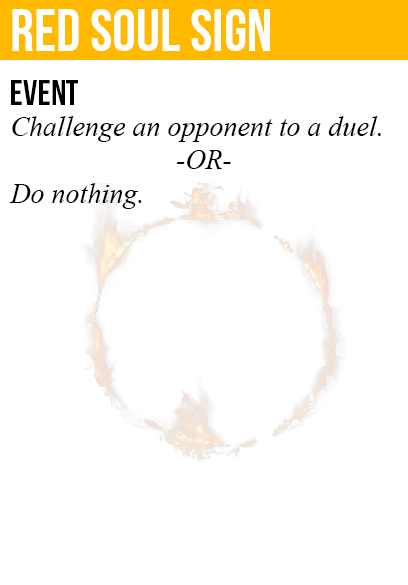
<style>
.page{position:relative;width:408px;height:585px;background:#ffffff}
.page>*{position:absolute;margin:0}
.t1{font:60px "BebasNeue";color:#ffffff}
.t2{font:36px "BebasNeue";color:#000000}
.t3{font:28px "TimesNewRomanPS-ItalicMT";color:#000000}
</style>
<div class="page">
<p class="t1" style="left:12px;top:9px;width:258px;height:42px">red soul sign</p>
<p class="t2" style="left:11px;top:80px;width:67px;height:25px">event</p>
<p class="t3" style="left:9px;top:116px;width:372px;height:93px">Challenge an opponent to a duel.<br><br>Do nothing.</p>
<p class="t3" style="left:176px;top:150px;width:55px;height:19px">-OR-</p>
</div>
